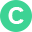
<style>
.page{position:relative;width:32px;height:32px;background:#3dd394}
.page>*{position:absolute;margin:0}
.t1{font:24px "Arial-BoldMT";color:#ffffff}
</style>
<div class="page">
<p class="t1" style="left:8px;top:7px;width:16px;height:17px">C</p>
</div>
